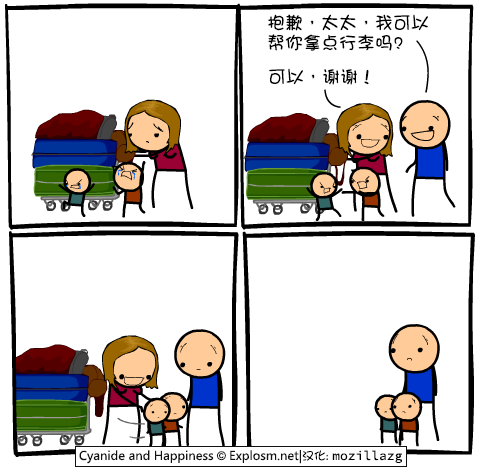
<style>
.page{position:relative;width:480px;height:470px;background:#ffffff}
.page>*{position:absolute;margin:0}
.t1{font:18px/20px "DFGirl";color:#000000}
.t2{font:18px "DFGirl";color:#000000}
</style>
<div class="page">
<p class="t1" style="left:268px;top:14px;width:160px;height:37px">抱歉，太太，我可以<br>帮你拿点行李吗?</p>
<p class="t2" style="left:269px;top:68px;width:100px;height:17px">可以，谢谢！</p>
</div>
